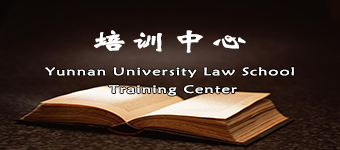
<style>
.page{position:relative;width:340px;height:150px}
.page>*{position:absolute;margin:0}
.t1{font:24px "STXinwei";letter-spacing:0.06em;color:#ffffff;font-weight:bold;scale:1.51 1}
.t2{font:10.7px/17.8px "STXinwei";letter-spacing:0.06em;color:#ffffff;font-weight:bold;scale:1.51 1}
</style>
<div class="page">
<p class="t1" style="left:94px;top:30px;width:152px;height:23px">培训中心</p>
<p class="t2" style="left:45px;top:67px;width:249px;height:29px;text-align:center">Yunnan University Law School <br>Training Center</p>
</div>
